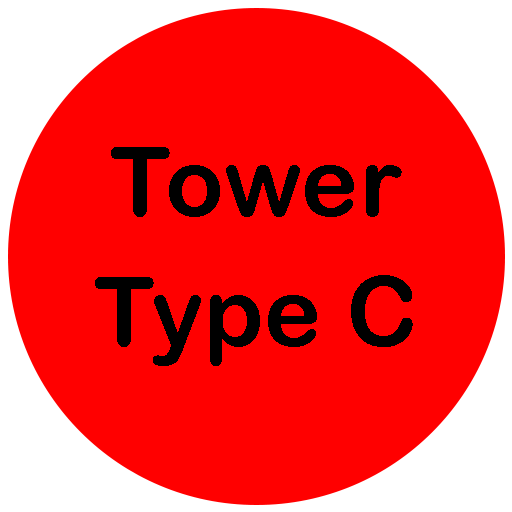
<style>
.page{position:relative;width:512px;height:512px;background:#ff0000}
.page>*{position:absolute;margin:0}
.t1{font:97.2px/65.1px "ArialRoundedMTBold";color:#000000}
</style>
<div class="page">
<p class="t1" style="left:95px;top:147px;width:318px;height:219px;text-align:center">Tower<br><br>Type C</p>
</div>
